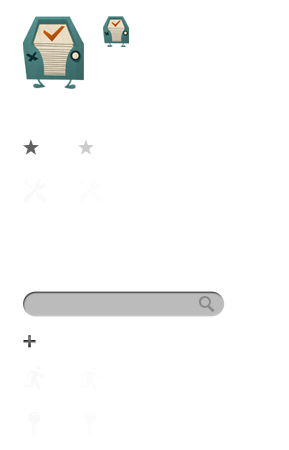
<style>
.page{position:relative;width:289px;height:450px;background:#ffffff}
.page>*{position:absolute;margin:0}
.t1{font:18px "Verdana-Bold"}
</style>
<div class="page">
<p class="t1" style="left:23px;top:335px;width:13px;height:13px">+</p>
</div>
